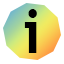
<style>
.page{position:relative;width:64px;height:64px;background:#ffffff}
.page>*{position:absolute;margin:0}
.t1{font:60px "TrebuchetMS-Bold";color:#000000}
</style>
<div class="page">
<p class="t1" style="left:24px;top:9px;width:13px;height:44px">i</p>
</div>
